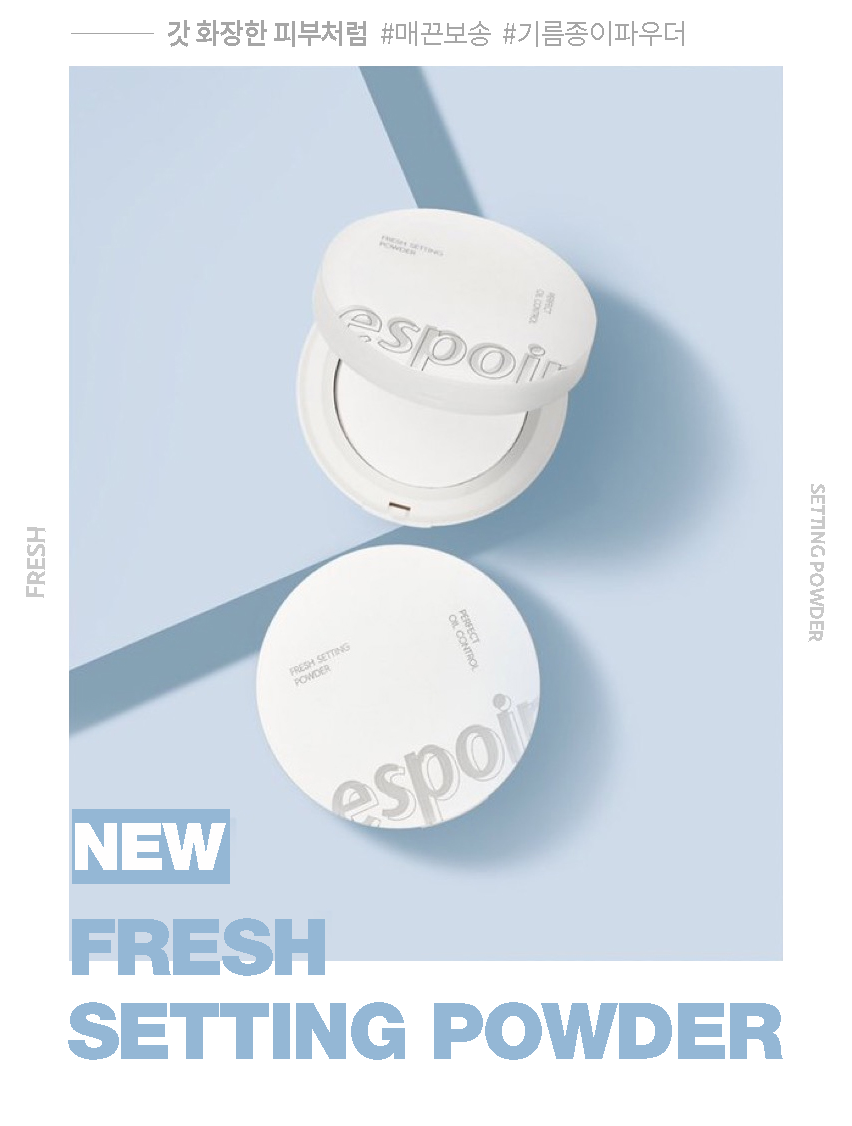
<style>
.page{position:relative;width:852px;height:1126px;background:#ffffff}
.page>*{position:absolute;margin:0}
.t1{font:28px "NotoSansCJKkr-Regular";letter-spacing:-0.04em;color:#a6a6a6}
.t2{font:28px "NotoSansCJKkr-Bold";letter-spacing:-0.04em;color:#a6a6a6}
.t3{font:20px "RNSSanz-Bold";letter-spacing:-0.06em;color:#c9c9c9;text-transform:uppercase}
.t4{font:26px "RNSSanz-Bold";letter-spacing:-0.06em;color:#c9c9c9;text-transform:uppercase}
.t5{font:66px "HelveticaNeueLTStd-Blk";letter-spacing:-0.04em;color:#fffefe}
.t6{font:79px/84px "HelveticaNeueLTStd-Blk";letter-spacing:-0.04em;color:#94b7d5}
</style>
<div class="page">
<p class="t1" style="left:168px;top:20px;width:516px;height:27px"><span class="t2">갓 화장한 피부처럼 </span>#매끈보송 #기름종이파우더</p>
<p class="t3" style="left:808px;top:484px;width:17px;height:158px;rotate:91deg">SETTING POWDER</p>
<p class="t4" style="left:26px;top:527px;width:20px;height:71px;rotate:-89deg">FRESH</p>
<p class="t5" style="left:75px;top:823px;width:151px;height:47px">NEW</p>
<p class="t6" style="left:68px;top:918px;width:715px;height:142px">FRESH <br>SETTING POWDER</p>
</div>
